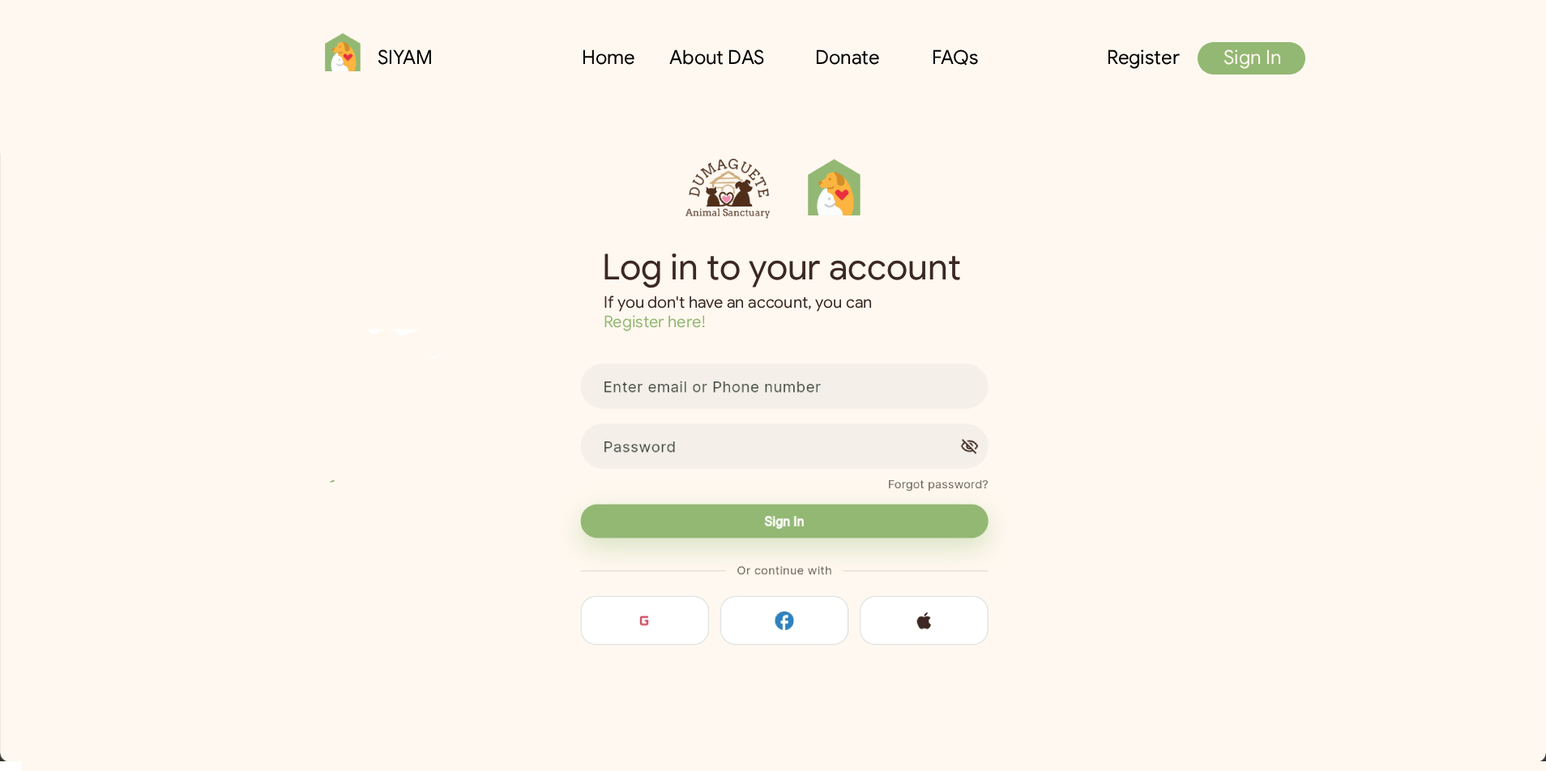
<style>
.page{position:relative;width:1546px;height:771px;background:#fff8f0}
.page>*{position:absolute;margin:0}
.t1{font:19.4px "GoogleSansFlex-Regular";color:#000000}
.t2{font:19.4px "GoogleSansFlex-Regular";color:#fff8f0}
.t3{font:35.7px "GoogleSansFlex-Regular";color:#3b2822}
.t4{font:16.2px "GoogleSansFlex-Regular";color:#3b2822}
.t5{font:16.2px "GoogleSansFlex-Regular";color:#93b873}
</style>
<div class="page">
<p class="t1" style="left:378px;top:49px;width:903px;height:20px">SIYAM      Home  About DAS  Donate  FAQs     Register  <span class="t2">Sign In</span></p>
<p class="t3" style="left:604px;top:253px;width:356px;height:35px">Log in to your account</p>
<p class="t4" style="left:604px;top:296px;width:268px;height:35px">If you don't have an account, you can<br><span class="t5">Register here!</span></p>
</div>
